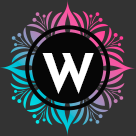
<style>
.page{position:relative;width:136px;height:136px;background:#333333}
.page>*{position:absolute;margin:0}
.t1{font:53.1px "JosefinSans-Bold";color:#ffffff}
</style>
<div class="page">
<p class="t1" style="left:42px;top:53px;width:52px;height:41px">W</p>
</div>
